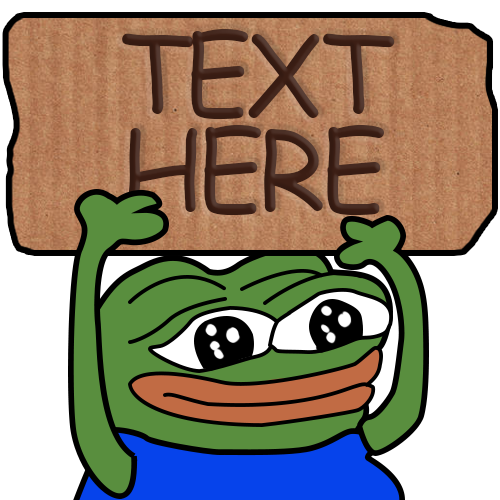
<style>
.page{position:relative;width:500px;height:500px;background:#ffffff}
.page>*{position:absolute;margin:0}
.t1{font:107.8px/96.2px "ComicSansMS";letter-spacing:-0.054em;color:#3c1e14}
</style>
<div class="page">
<p class="t1" style="left:122px;top:29px;width:273px;height:186px;text-align:center">TEXT HERE</p>
</div>
